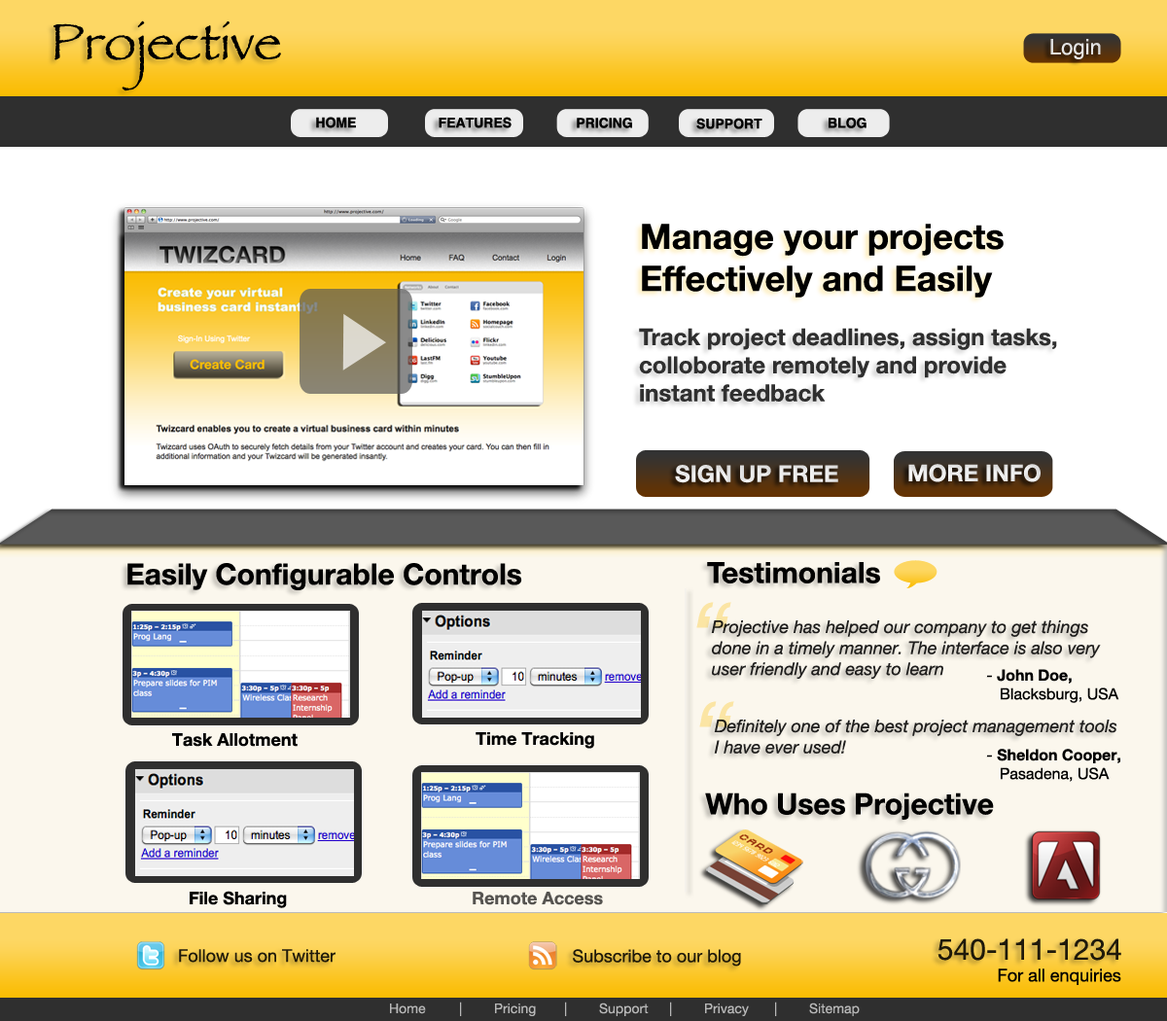
<style>
.page{position:relative;width:1167px;height:1021px;background:#ffffff}
.page>*{position:absolute;margin:0}
.t1{font:52.5px "Papyrus";color:#000000}
.t2{font:21.4px "Helvetica";color:#e4e4e4}
.t3{font:13.6px "Helvetica-Bold";color:#000000}
.t4{font:35px "HelveticaNeue-Bold";color:#000000}
.t5{font:23.3px "HelveticaNeue-Bold";color:#2f2f2f}
.t6{font:23.3px "HelveticaNeue-Bold";color:#e9e9e9}
.t7{font:23.3px "HelveticaNeue-Bold";color:#ffffff}
.t8{font:29.2px "HelveticaNeue-Bold";color:#000000}
.t9{font:97.3px "HelveticaNeue-Italic";color:#fbe5a4}
.t10{font:17.5px "HelveticaNeue-Italic";color:#1f1e1d}
.t11{font:15.6px "HelveticaNeue";color:#000000}
.t12{font:15.6px "HelveticaNeue-Italic";color:#000000}
.t13{font:15.6px "HelveticaNeue-Bold";color:#000000}
.t14{font:17.5px "HelveticaNeue-Bold";color:#000000}
.t15{font:17.5px "HelveticaNeue-Bold";color:#565451}
.t16{font:29.2px "HelveticaNeue";color:#1f1a0b}
.t17{font:17.5px "HelveticaNeue";color:#1f1909}
.t18{font:17.5px "HelveticaNeue";color:#000000}
.t19{font:13.6px "HelveticaNeue";color:#b8b8b8}
</style>
<div class="page">
<p class="t1" style="left:54px;top:20px;width:227px;height:71px">Projective</p>
<p class="t2" style="left:1051px;top:39px;width:50px;height:20px">Login</p>
<p class="t3" style="left:316px;top:117px;width:40px;height:11px">HOME</p>
<p class="t3" style="left:439px;top:117px;width:73px;height:11px">FEATURES</p>
<p class="t3" style="left:577px;top:118px;width:55px;height:10px">PRICING</p>
<p class="t3" style="left:697px;top:118px;width:66px;height:11px">SUPPORT</p>
<p class="t3" style="left:829px;top:118px;width:38px;height:10px">BLOG</p>
<p class="t4" style="left:642px;top:224px;width:362px;height:74px">Manage your projects <br>Effectively and Easily</p>
<p class="t5" style="left:639px;top:328px;width:418px;height:74px">Track project deadlines, assign tasks,<br>colloborate remotely and provide<br>instant feedback</p>
<p class="t6" style="left:675px;top:465px;width:164px;height:18px">SIGN UP FREE</p>
<p class="t7" style="left:909px;top:464px;width:132px;height:19px">MORE INFO</p>
<p class="t8" style="left:127px;top:563px;width:395px;height:28px">Easily Configurable Controls</p>
<p class="t9" style="left:697px;top:602px;width:35px;height:26px">“</p>
<p class="t10" style="left:711px;top:621px;width:390px;height:58px">Projective has helped our company to get things<br>done in a timely manner. The interface is also very<br>user friendly and easy to learn</p>
<p class="t11" style="left:986px;top:669px;width:134px;height:34px"><span class="t12">- </span><span class="t13">John Doe, <br>   </span>Blacksburg, USA</p>
<p class="t9" style="left:699px;top:701px;width:35px;height:27px">“</p>
<p class="t10" style="left:714px;top:720px;width:404px;height:34px">Definitely one of the best project management tools<br>I have ever used!</p>
<p class="t14" style="left:172px;top:734px;width:126px;height:13px">Task Allotment</p>
<p class="t14" style="left:476px;top:733px;width:118px;height:16px">Time Tracking</p>
<p class="t13" style="left:986px;top:749px;width:135px;height:33px"><span class="t12">- </span>Sheldon Cooper, <br>   <span class="t11">Pasadena, USA</span></p>
<p class="t8" style="left:705px;top:793px;width:289px;height:27px">Who Uses Projective</p>
<p class="t14" style="left:190px;top:891px;width:97px;height:18px">File Sharing</p>
<p class="t15" style="left:473px;top:892px;width:130px;height:14px">Remote Access</p>
<p class="t16" style="left:938px;top:939px;width:184px;height:22px">540-111-1234</p>
<p class="t17" style="left:179px;top:949px;width:157px;height:14px">Follow us on Twitter</p>
<p class="t17" style="left:573px;top:949px;width:168px;height:18px">Subscribe to our blog</p>
<p class="t18" style="left:998px;top:969px;width:124px;height:16px">For all enquiries</p>
<p class="t19" style="left:390px;top:1002px;width:470px;height:15px">Home | Pricing | Support | Privacy | Sitemap</p>
</div>
